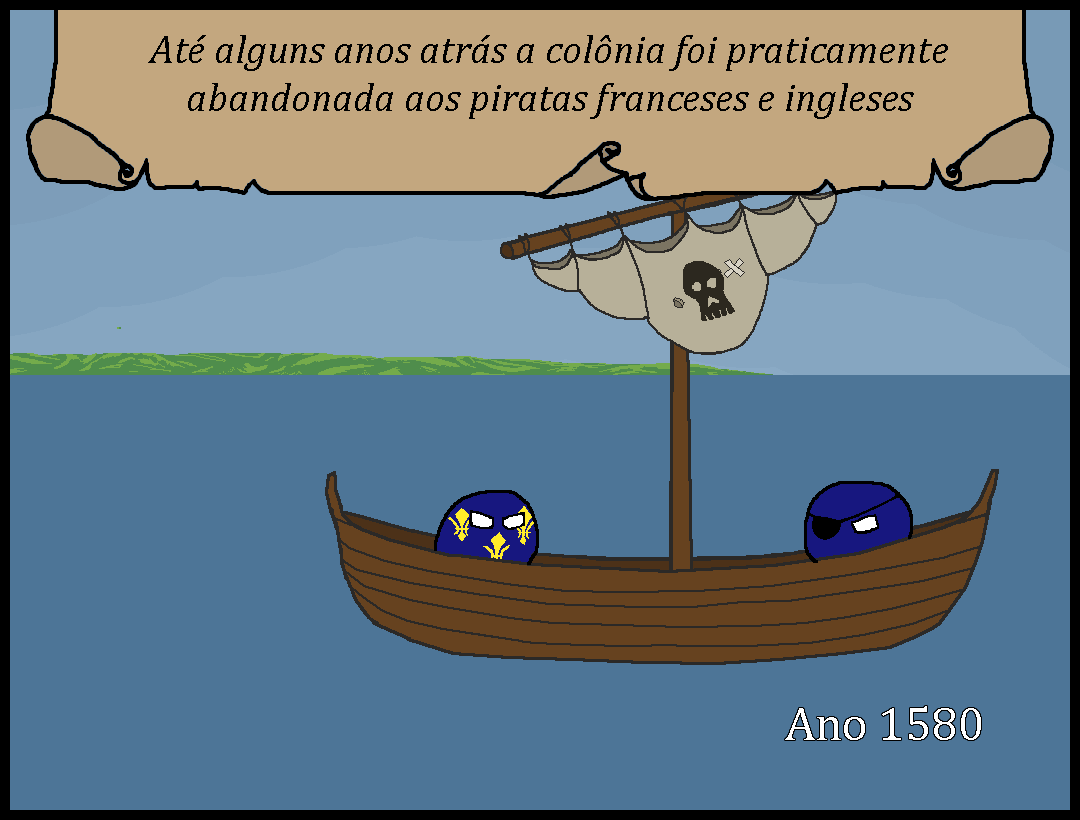
<style>
.page{position:relative;width:1080px;height:820px;background:#4d7597}
.page>*{position:absolute;margin:0}
.t1{font:40px "Cambria-Italic";color:#000000}
.t2{font:48px "Cambria";color:#ffffff}
</style>
<div class="page">
<p class="t1" style="left:148px;top:35px;width:800px;height:84px;text-align:center">Até alguns anos atrás a colônia foi praticamente abandonada aos piratas franceses e ingleses</p>
<p class="t2" style="left:785px;top:706px;width:196px;height:34px">Ano 1580</p>
</div>
